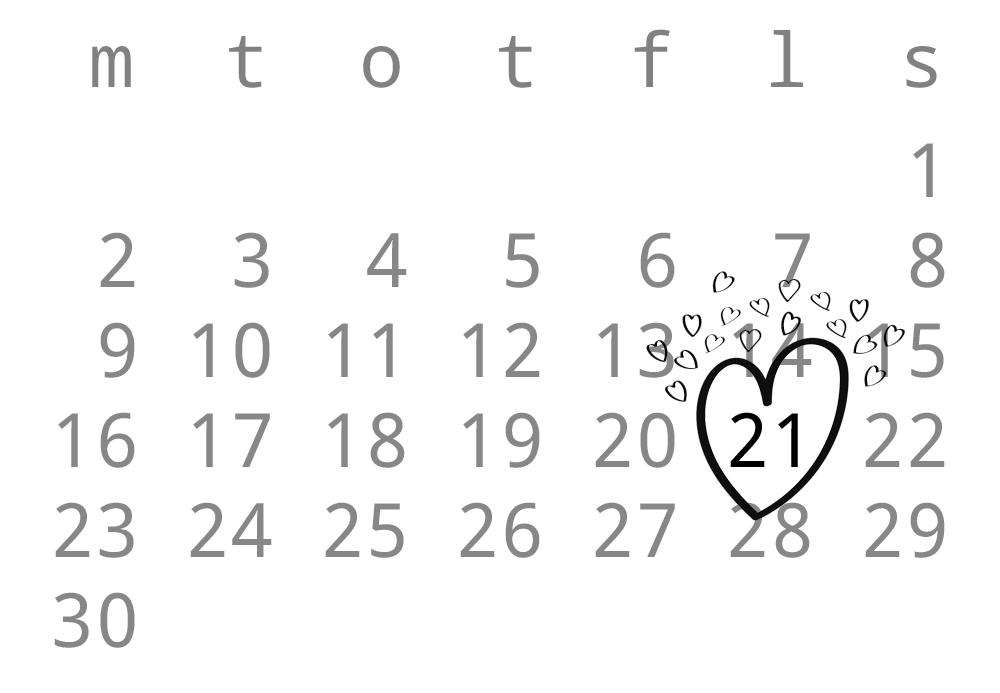
<style>
.page{position:relative;width:1000px;height:693px;background:#ffffff}
.page>*{position:absolute;margin:0}
.t1{font:75px "DroidSansMonoForPowerline";color:#818181}
.t2{font:75px "DroidSansMonoForPowerline";color:#878787}
.t3{font:75px "DroidSansMonoForPowerline";color:#000000}
</style>
<div class="page">
<p class="t1" style="left:92px;top:29px;width:845px;height:59px">m  t  o  t  f  l  s</p>
<p class="t2" style="left:54px;top:143px;width:891px;height:505px">1<br> 2  3  4  5  6  7  8<br> 9 10 11 12 13 14 15<br>16 17 18 19 20 <span class="t3">21 </span>22<br>23 24 25 26 27 28 29<br>30</p>
</div>
